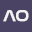
<style>
.page{position:relative;width:32px;height:32px;background:#4b4363}
.page>*{position:absolute;margin:0}
.t1{font:16px "NasalizationRg-Regular";letter-spacing:0.01em;color:#f2f2f2;font-weight:bold}
</style>
<div class="page">
<p class="t1" style="left:3px;top:10px;width:26px;height:12px">AO</p>
</div>
